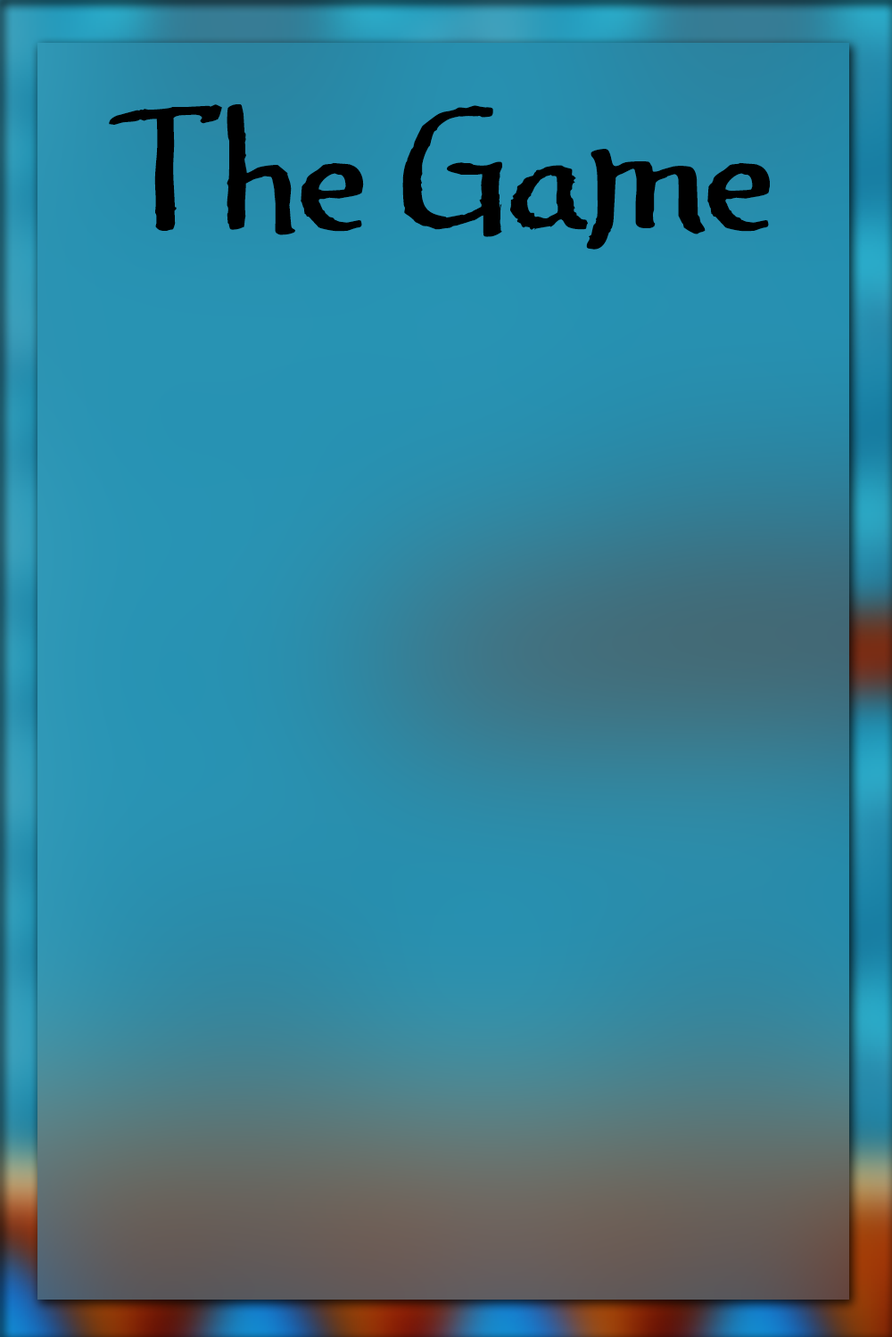
<style>
.page{position:relative;width:892px;height:1337px}
.page>*{position:absolute;margin:0}
.t1{font:140.9px "JandaAmazingGrace";color:#000000}
</style>
<div class="page">
<p class="t1" style="left:109px;top:104px;width:660px;height:146px">The Game</p>
</div>
